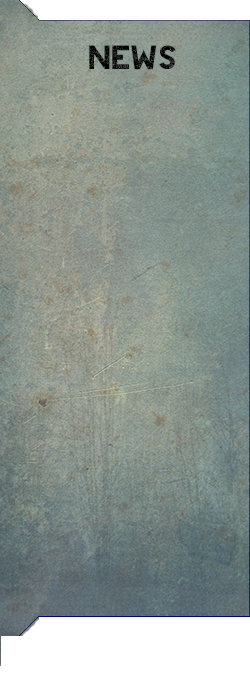
<style>
.page{position:relative;width:250px;height:700px}
.page>*{position:absolute;margin:0}
.t1{font:32px "REVOLUTIONII";color:#030303;text-transform:uppercase}
</style>
<div class="page">
<p class="t1" style="left:89px;top:45px;width:87px;height:25px">NEWS</p>
</div>
